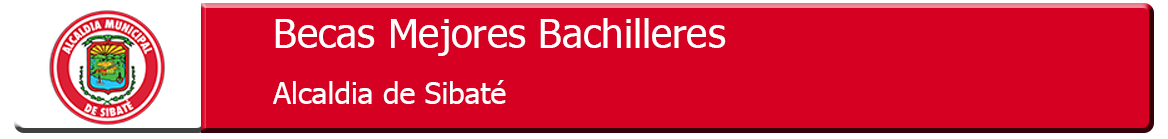
<style>
.page{position:relative;width:1168px;height:139px;background:#d50022}
.page>*{position:absolute;margin:0}
.t1{font:40px "Tahoma";color:#ffffff}
.t2{font:30px "Tahoma";color:#ffffff}
</style>
<div class="page">
<p class="t1" style="left:275px;top:18px;width:451px;height:38px">Becas Mejores Bachilleres</p>
<p class="t2" style="left:273px;top:80px;width:233px;height:24px">Alcaldia de Sibaté</p>
</div>
